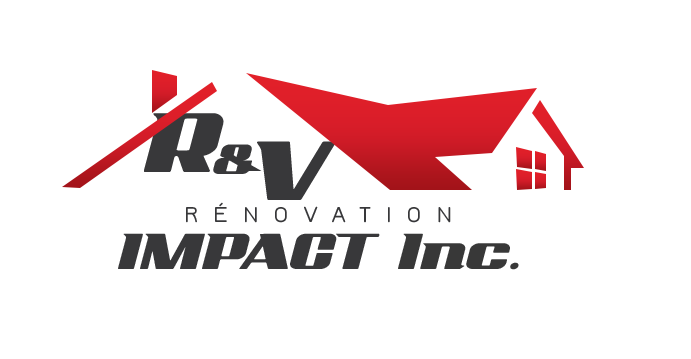
<style>
.page{position:relative;width:691px;height:359px;background:#ffffff}
.page>*{position:absolute;margin:0}
.t1{font:120px "AddCityboyNormal";letter-spacing:-0.02em;color:#38383a}
.t2{font:60px "AddCityboyNormal";letter-spacing:-0.02em;color:#38383a}
.t3{font:24px "JuraDemiBold";letter-spacing:0.62em;color:#38383a}
.t4{font:72px "AddCityboyNormal";letter-spacing:-0.02em;color:#38383a}
.t5{font:72px "AddCityboyNormal";letter-spacing:-0.02em;color:#383838}
</style>
<div class="page">
<p class="t1" style="left:144px;top:113px;width:80px;height:59px">R</p>
<p class="t2" style="left:213px;top:144px;width:49px;height:30px">&amp;</p>
<p class="t1" style="left:257px;top:141px;width:79px;height:59px">V</p>
<p class="t3" style="left:186px;top:202px;width:265px;height:21px">RÉNOVATION</p>
<p class="t4" style="left:118px;top:233px;width:262px;height:36px">IMPACT</p>
<p class="t5" style="left:398px;top:233px;width:121px;height:37px">Inc.</p>
</div>
